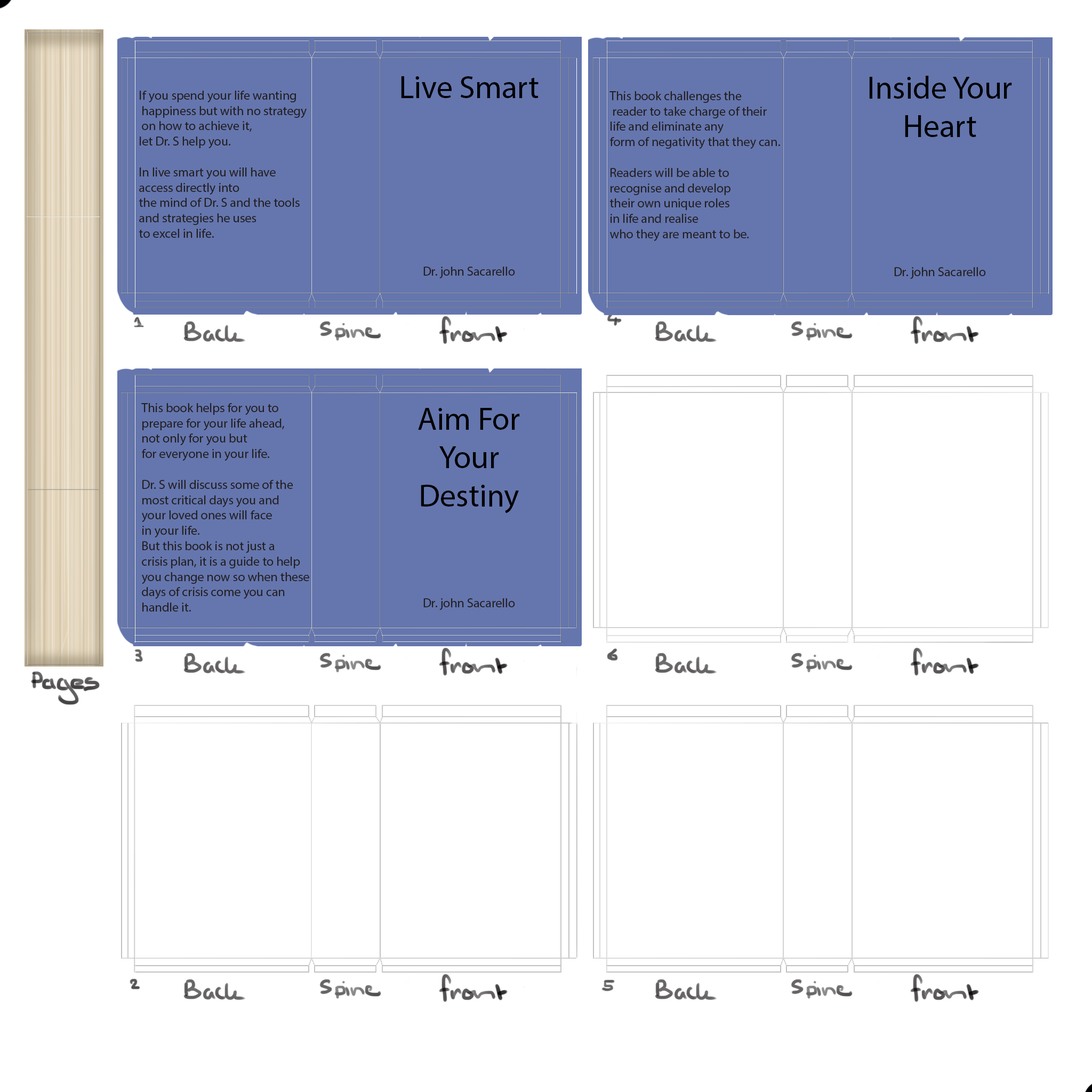
<style>
.page{position:relative;width:1092px;height:1092px;background:#ffffff}
.page>*{position:absolute;margin:0}
.t1{font:32px "MyriadPro-Regular";color:#000103}
.t2{font:12.8px "MyriadPro-Regular";color:#231f20}
</style>
<div class="page">
<p class="t1" style="left:401px;top:76px;width:138px;height:22px">Live Smart</p>
<p class="t1" style="left:869px;top:76px;width:143px;height:61px;text-align:center">Inside Your Heart</p>
<p class="t2" style="left:139px;top:91px;width:168px;height:147px">If you spend your life wanting<br> happiness but with no strategy<br> on how to achieve it, <br>let Dr. S help you. <br><br>In live smart you will have <br>access directly into <br>the mind of Dr. S and the tools <br>and strategies he uses <br>to excel in life.</p>
<p class="t2" style="left:609px;top:91px;width:171px;height:150px">This book challenges the<br> reader to take charge of their <br>life and eliminate any <br>form of negativity that they can. <br><br>Readers will be able to <br>recognise and develop <br>their own unique roles <br>in life and realise <br>who they are meant to be.</p>
<p class="t2" style="left:423px;top:267px;width:92px;height:11px">Dr. john Sacarello</p>
<p class="t2" style="left:894px;top:267px;width:92px;height:12px">Dr. john Sacarello</p>
<p class="t2" style="left:141px;top:403px;width:168px;height:209px">This book helps for you to <br>prepare for your life ahead, <br>not only for you but <br>for everyone in your life. <br><br>Dr. S will discuss some of the <br>most critical days you and <br>your loved ones will face <br>in your life. <br>But this book is not just a <br>crisis plan, it is a guide to help <br>you change now so when these <br>days of crisis come you can <br>handle it.</p>
<p class="t1" style="left:418px;top:408px;width:102px;height:105px;text-align:center">Aim For Your Destiny</p>
<p class="t2" style="left:423px;top:598px;width:92px;height:12px">Dr. john Sacarello</p>
</div>
